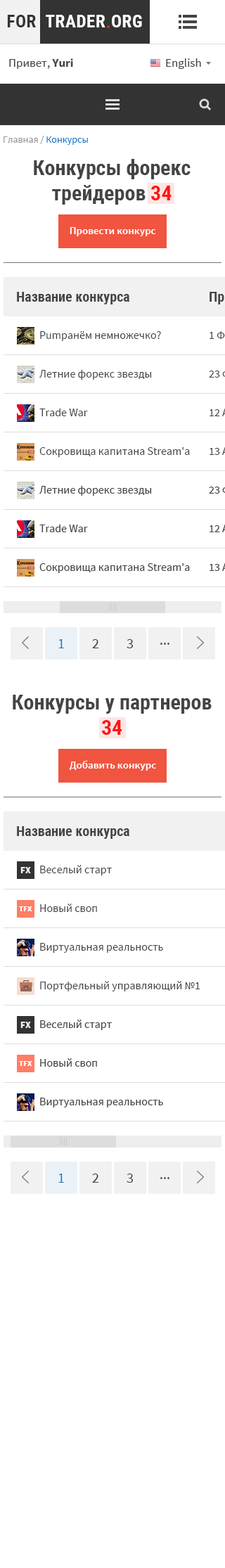
<style>
.page{position:relative;width:225px;height:1568px;background:#ffffff}
.page>*{position:absolute;margin:0}
.t1{font:9.8px "SourceSansPro-Regular";color:#999999}
.t2{font:9.8px "SourceSansPro-Regular";color:#167ac6}
.t3{font:21.1px/25.3px "RobotoCondensed-Bold";color:#444444}
.t4{font:21.1px/25.3px "RobotoCondensed-Bold";color:#ff1616}
.t5{font:10.5px "SourceSansPro-SemiBold";color:#ffffff}
.t6{font:14.1px "RobotoCondensed-Bold";color:#444444}
.t7{font:11.3px "SourceSansPro-Regular";color:#444444}
.t8{font:14.1px "SourceSansPro-Regular";color:#167ac6}
.t9{font:14.1px "SourceSansPro-Regular";color:#444444}
.t10{font:9.1px "SourceSansPro-Black";color:#f1f1f1}
.t11{font:7.7px "SourceSansPro-Black";color:#ffffff}
</style>
<div class="page">
<p class="t1" style="left:4px;top:136px;width:84px;height:9px">Главная / <span class="t2">Конкурсы</span></p>
<p class="t3" style="left:34px;top:159px;width:157px;height:46px;text-align:center">Конкурсы форекс<br>трейдеров <span class="t4">34</span></p>
<p class="t5" style="left:70px;top:227px;width:86px;height:9px">Провести конкурс</p>
<p class="t6" style="left:17px;top:292px;width:112px;height:12px">Название конкурса</p>
<p class="t7" style="left:40px;top:331px;width:121px;height:10px">Рumpaнём немножечко?</p>
<p class="t7" style="left:39px;top:370px;width:113px;height:10px">Летние форекс звезды</p>
<p class="t7" style="left:39px;top:409px;width:49px;height:7px">Trade War</p>
<p class="t7" style="left:39px;top:447px;width:151px;height:10px">Сокровища капитана Stream'a</p>
<p class="t8" style="left:58px;top:639px;width:6px;height:9px">1</p>
<p class="t9" style="left:92px;top:639px;width:7px;height:9px">2</p>
<p class="t9" style="left:127px;top:639px;width:6px;height:9px">3</p>
<p class="t9" style="left:160px;top:643px;width:9px;height:2px">...</p>
<p class="t3" style="left:13px;top:695px;width:199px;height:40px;text-align:center">Конкурсы у партнеров<br><span class="t4">34</span></p>
<p class="t5" style="left:69px;top:760px;width:87px;height:11px">Добавить конкурс</p>
<p class="t6" style="left:17px;top:826px;width:112px;height:13px">Название конкурса</p>
<p class="t10" style="left:20px;top:867px;width:11px;height:6px">FX</p>
<p class="t7" style="left:40px;top:865px;width:72px;height:10px">Веселый старт</p>
<p class="t7" style="left:40px;top:904px;width:57px;height:8px">Новый своп</p>
<p class="t11" style="left:19px;top:906px;width:13px;height:5px">TFX</p>
<p class="t7" style="left:40px;top:943px;width:123px;height:10px">Виртуальная реальность</p>
<p class="t7" style="left:40px;top:981px;width:160px;height:10px">Портфельный управляющий №1</p>
<p class="t8" style="left:58px;top:1174px;width:6px;height:9px">1</p>
<p class="t9" style="left:92px;top:1174px;width:7px;height:9px">2</p>
<p class="t9" style="left:127px;top:1174px;width:6px;height:9px">3</p>
<p class="t9" style="left:160px;top:1177px;width:9px;height:2px">...</p>
</div>
